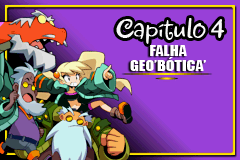
<style>
.page{position:relative;width:240px;height:160px;background:#9840d8}
.page>*{position:absolute;margin:0}
.t1{font:32px "Jewels";color:#f8f8f8;scale:0.95 1}
.t2{font:31px "Jewels";color:#f8f8f8}
.t3{font:14.2px "Impact";color:#ffffff;scale:1.13 1}
</style>
<div class="page">
<p class="t1" style="left:116px;top:18px;width:109px;height:26px">Capítu<span class="t2">l</span>o 4</p>
<p class="t3" style="left:150px;top:45px;width:37px;height:11px">FALHA</p>
<p class="t3" style="left:130px;top:57px;width:76px;height:14px">GEO’BÓTICA’</p>
</div>
